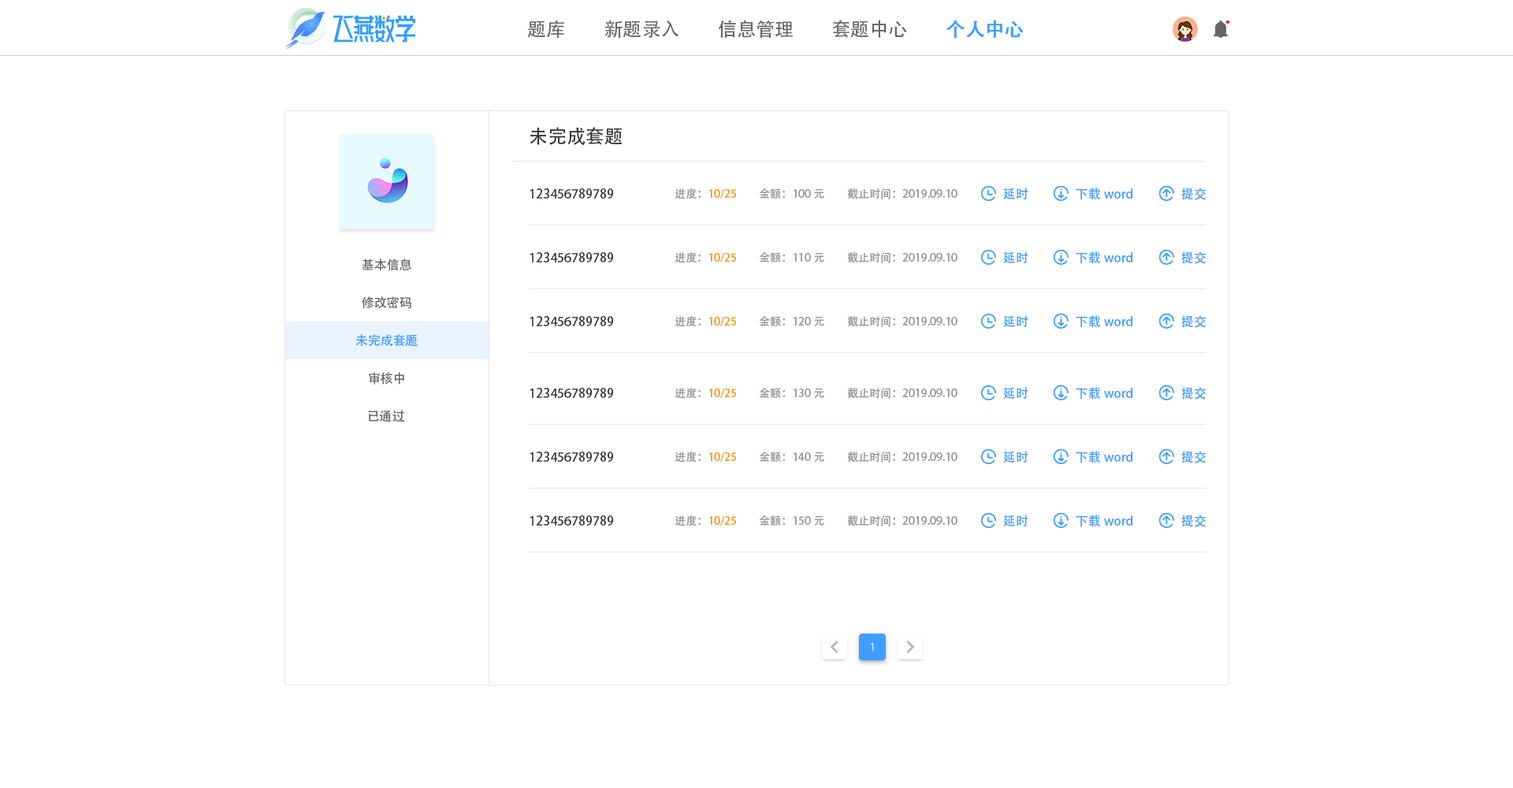
<style>
.page{position:relative;width:1513px;height:788px;background:#ffffff}
.page>*{position:absolute;margin:0}
.t1{font:18.9px "AdobeHeitiStd-Regular";color:#666666}
.t2{font:18.9px "AdobeHeitiStd-Regular";color:#409eff;font-weight:bold}
.t3{font:18.9px "AdobeHeitiStd-Regular";color:#333333}
.t4{font:12.6px "AdobeHeitiStd-Regular";color:#333333}
.t5{font:11px "AdobeHeitiStd-Regular";color:#ff9814}
.t6{font:11px "AdobeHeitiStd-Regular";color:#999999}
.t7{font:12.6px "AdobeHeitiStd-Regular";color:#409eff}
.t8{font:12.6px "AdobeHeitiStd-Regular";color:#666666}
</style>
<div class="page">
<p class="t1" style="left:527px;top:20px;width:37px;height:18px">题库</p>
<p class="t1" style="left:604px;top:20px;width:75px;height:18px">新题录入</p>
<p class="t1" style="left:718px;top:20px;width:75px;height:19px">信息管理</p>
<p class="t1" style="left:833px;top:20px;width:74px;height:18px">套题中心</p>
<p class="t2" style="left:946px;top:20px;width:78px;height:19px">个人中心</p>
<p class="t3" style="left:530px;top:127px;width:93px;height:18px">未完成套题</p>
<p class="t4" style="left:530px;top:188px;width:84px;height:11px">123456789789</p>
<p class="t5" style="left:675px;top:188px;width:61px;height:11px"><span class="t6">进度：</span>10/25</p>
<p class="t6" style="left:759px;top:188px;width:65px;height:11px">金额：100元</p>
<p class="t6" style="left:847px;top:188px;width:111px;height:11px">截止时间：2019.09.10</p>
<p class="t7" style="left:1003px;top:188px;width:25px;height:11px">延时</p>
<p class="t7" style="left:1076px;top:188px;width:57px;height:12px">下载word</p>
<p class="t7" style="left:1181px;top:188px;width:25px;height:12px">提交</p>
<p class="t4" style="left:530px;top:252px;width:84px;height:10px">123456789789</p>
<p class="t5" style="left:675px;top:252px;width:61px;height:11px"><span class="t6">进度：</span>10/25</p>
<p class="t6" style="left:759px;top:252px;width:65px;height:10px">金额：110元</p>
<p class="t6" style="left:847px;top:252px;width:111px;height:11px">截止时间：2019.09.10</p>
<p class="t7" style="left:1003px;top:251px;width:25px;height:12px">延时</p>
<p class="t7" style="left:1076px;top:251px;width:57px;height:13px">下载word</p>
<p class="t7" style="left:1181px;top:251px;width:25px;height:13px">提交</p>
<p class="t8" style="left:362px;top:258px;width:50px;height:13px">基本信息</p>
<p class="t8" style="left:362px;top:296px;width:49px;height:13px">修改密码</p>
<p class="t4" style="left:530px;top:316px;width:84px;height:10px">123456789789</p>
<p class="t5" style="left:675px;top:316px;width:61px;height:11px"><span class="t6">进度：</span>10/25</p>
<p class="t6" style="left:759px;top:316px;width:65px;height:10px">金额：120元</p>
<p class="t6" style="left:847px;top:316px;width:111px;height:11px">截止时间：2019.09.10</p>
<p class="t7" style="left:1003px;top:315px;width:25px;height:12px">延时</p>
<p class="t7" style="left:1076px;top:315px;width:57px;height:13px">下载word</p>
<p class="t7" style="left:1181px;top:315px;width:25px;height:13px">提交</p>
<p class="t7" style="left:355px;top:334px;width:63px;height:13px">未完成套题</p>
<p class="t8" style="left:369px;top:372px;width:35px;height:13px">审核中</p>
<p class="t4" style="left:530px;top:388px;width:84px;height:10px">123456789789</p>
<p class="t5" style="left:675px;top:388px;width:61px;height:11px"><span class="t6">进度：</span>10/25</p>
<p class="t6" style="left:759px;top:388px;width:65px;height:10px">金额：130元</p>
<p class="t6" style="left:847px;top:388px;width:111px;height:11px">截止时间：2019.09.10</p>
<p class="t7" style="left:1003px;top:387px;width:25px;height:12px">延时</p>
<p class="t7" style="left:1076px;top:387px;width:57px;height:13px">下载word</p>
<p class="t7" style="left:1181px;top:387px;width:25px;height:13px">提交</p>
<p class="t8" style="left:368px;top:410px;width:37px;height:12px">已通过</p>
<p class="t4" style="left:530px;top:452px;width:84px;height:10px">123456789789</p>
<p class="t5" style="left:675px;top:452px;width:61px;height:11px"><span class="t6">进度：</span>10/25</p>
<p class="t6" style="left:759px;top:452px;width:65px;height:10px">金额：140元</p>
<p class="t6" style="left:847px;top:452px;width:111px;height:11px">截止时间：2019.09.10</p>
<p class="t7" style="left:1003px;top:451px;width:25px;height:12px">延时</p>
<p class="t7" style="left:1076px;top:451px;width:57px;height:12px">下载word</p>
<p class="t7" style="left:1181px;top:451px;width:25px;height:12px">提交</p>
<p class="t4" style="left:530px;top:515px;width:84px;height:11px">123456789789</p>
<p class="t5" style="left:675px;top:515px;width:61px;height:11px"><span class="t6">进度：</span>10/25</p>
<p class="t6" style="left:759px;top:515px;width:65px;height:11px">金额：150元</p>
<p class="t6" style="left:847px;top:515px;width:111px;height:11px">截止时间：2019.09.10</p>
<p class="t7" style="left:1003px;top:515px;width:25px;height:11px">延时</p>
<p class="t7" style="left:1076px;top:515px;width:57px;height:12px">下载word</p>
<p class="t7" style="left:1181px;top:515px;width:25px;height:12px">提交</p>
</div>
